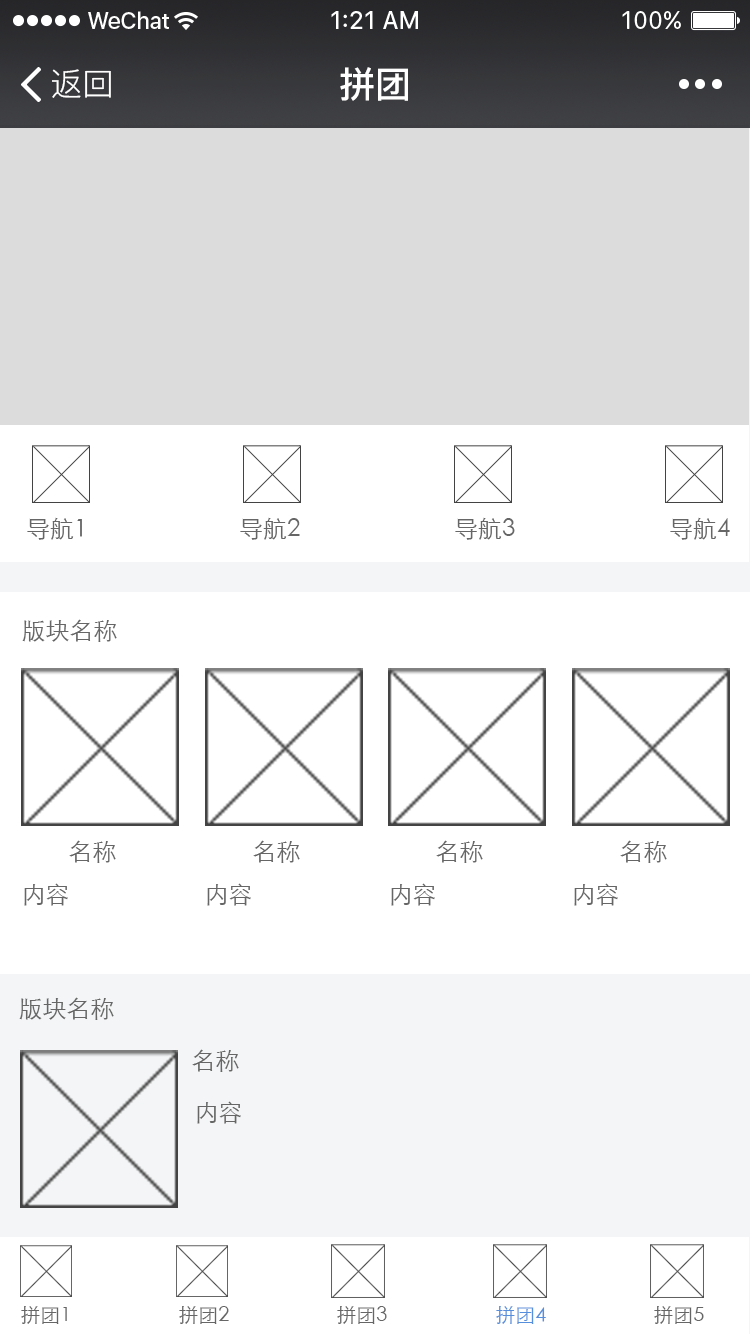
<style>
.page{position:relative;width:750px;height:1334px;background:#ffffff}
.page>*{position:absolute;margin:0}
.t1{font:32px "PingFang-SC-Regular";color:#ffffff}
.t2{font:36px "PingFang-SC-Bold";color:#ffffff}
.t3{font:24px "STXihei";color:#666666}
.t4{font:20px "STXihei";color:#666666}
.t5{font:20px "STXihei";color:#568fdc}
</style>
<div class="page">
<p class="t1" style="left:52px;top:69px;width:59px;height:29px">返回</p>
<p class="t2" style="left:340px;top:67px;width:68px;height:34px">拼团</p>
<p class="t3" style="left:27px;top:517px;width:55px;height:23px">导航1</p>
<p class="t3" style="left:240px;top:517px;width:60px;height:23px">导航2</p>
<p class="t3" style="left:455px;top:517px;width:60px;height:23px">导航3</p>
<p class="t3" style="left:670px;top:517px;width:60px;height:23px">导航4</p>
<p class="t3" style="left:22px;top:619px;width:95px;height:23px">版块名称</p>
<p class="t3" style="left:69px;top:840px;width:47px;height:23px">名称</p>
<p class="t3" style="left:253px;top:840px;width:47px;height:23px">名称</p>
<p class="t3" style="left:436px;top:840px;width:47px;height:23px">名称</p>
<p class="t3" style="left:620px;top:840px;width:47px;height:23px">名称</p>
<p class="t3" style="left:24px;top:883px;width:44px;height:23px">内容</p>
<p class="t3" style="left:207px;top:883px;width:44px;height:23px">内容</p>
<p class="t3" style="left:391px;top:883px;width:44px;height:23px">内容</p>
<p class="t3" style="left:574px;top:883px;width:44px;height:23px">内容</p>
<p class="t3" style="left:19px;top:997px;width:95px;height:23px">版块名称</p>
<p class="t3" style="left:192px;top:1049px;width:47px;height:23px">名称</p>
<p class="t3" style="left:197px;top:1101px;width:44px;height:23px">内容</p>
<p class="t4" style="left:21px;top:1306px;width:46px;height:18px">拼团1</p>
<p class="t4" style="left:179px;top:1306px;width:50px;height:18px">拼团2</p>
<p class="t4" style="left:337px;top:1306px;width:50px;height:18px">拼团3</p>
<p class="t5" style="left:496px;top:1306px;width:50px;height:18px">拼团4</p>
<p class="t4" style="left:654px;top:1306px;width:50px;height:18px">拼团5</p>
</div>
